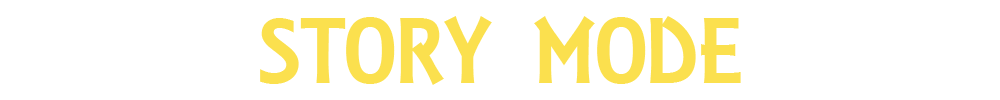
<style>
.page{position:relative;width:1000px;height:100px;background:#ffffff}
.page>*{position:absolute;margin:0}
.t1{font:100px "ARESSENCE";color:#fbe04e}
</style>
<div class="page">
<p class="t1" style="left:260px;top:16px;width:481px;height:69px">STORY MODE</p>
</div>
